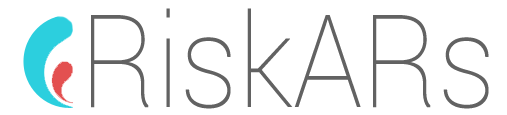
<style>
.page{position:relative;width:507px;height:115px;background:#ffffff}
.page>*{position:absolute;margin:0}
.t1{font:129.2px "Roboto-Thin";color:#626262;scale:0.9 1}
</style>
<div class="page">
<p class="t1" style="left:91px;top:8px;width:398px;height:101px">RiskARs</p>
</div>
